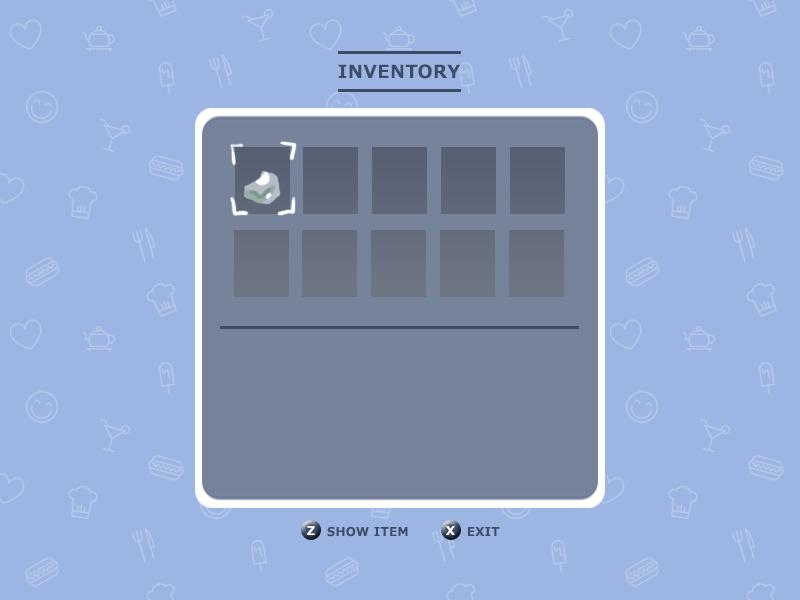
<style>
.page{position:relative;width:800px;height:600px;background:#9cb5e3}
.page>*{position:absolute;margin:0}
.t1{font:18px "Meiryo-Bold";letter-spacing:0.05em;color:#3d4c67}
.t2{font:12px "Meiryo-Bold";letter-spacing:0.05em;color:#ffffff}
.t3{font:12px "Meiryo-Bold";letter-spacing:0.05em;color:#3d4c67}
</style>
<div class="page">
<p class="t1" style="left:338px;top:64px;width:123px;height:15px">INVENTORY</p>
<p class="t2" style="left:307px;top:526px;width:8px;height:9px">Z</p>
<p class="t3" style="left:327px;top:526px;width:81px;height:11px">SHOW ITEM</p>
<p class="t2" style="left:446px;top:526px;width:9px;height:9px">X</p>
<p class="t3" style="left:468px;top:527px;width:32px;height:9px">EXIT</p>
</div>
